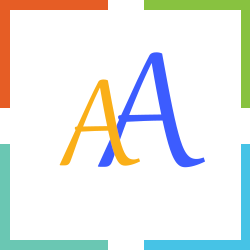
<style>
.page{position:relative;width:250px;height:250px;background:#ffffff}
.page>*{position:absolute;margin:0}
.t1{font:200px "Gabriola";color:#3c5cff}
.t2{font:150px "Gabriola";color:#faaf18}
</style>
<div class="page">
<p class="t1" style="left:97px;top:52px;width:108px;height:116px">A</p>
<p class="t2" style="left:59px;top:79px;width:81px;height:87px">A</p>
</div>
